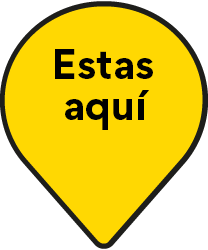
<style>
.page{position:relative;width:208px;height:250px;background:#ffd802}
.page>*{position:absolute;margin:0}
.t1{font:37.5px "Gordita-Bold";color:#000000}
</style>
<div class="page">
<p class="t1" style="left:55px;top:49px;width:98px;height:30px">Estas</p>
<p class="t1" style="left:65px;top:90px;width:84px;height:40px">aquí</p>
</div>
